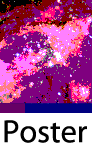
<style>
.page{position:relative;width:92px;height:150px;background:#7f007f}
.page>*{position:absolute;margin:0}
.t1{font:32.3px "MyriadPro-Regular";color:#000000}
</style>
<div class="page">
<p class="t1" style="left:4px;top:120px;width:83px;height:23px">Poster</p>
</div>
